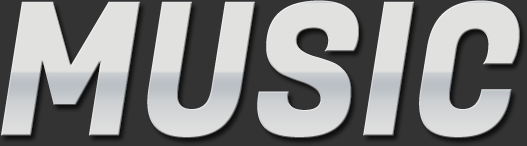
<style>
.page{position:relative;width:527px;height:146px;background:#333333}
.page>*{position:absolute;margin:0}
.t1{font:185.2px "FugazOne-Regular";color:#dfdfdf;scale:0.89 1}
</style>
<div class="page">
<p class="t1" style="left:1px;top:0px;width:519px;height:138px">MUSIC</p>
</div>
